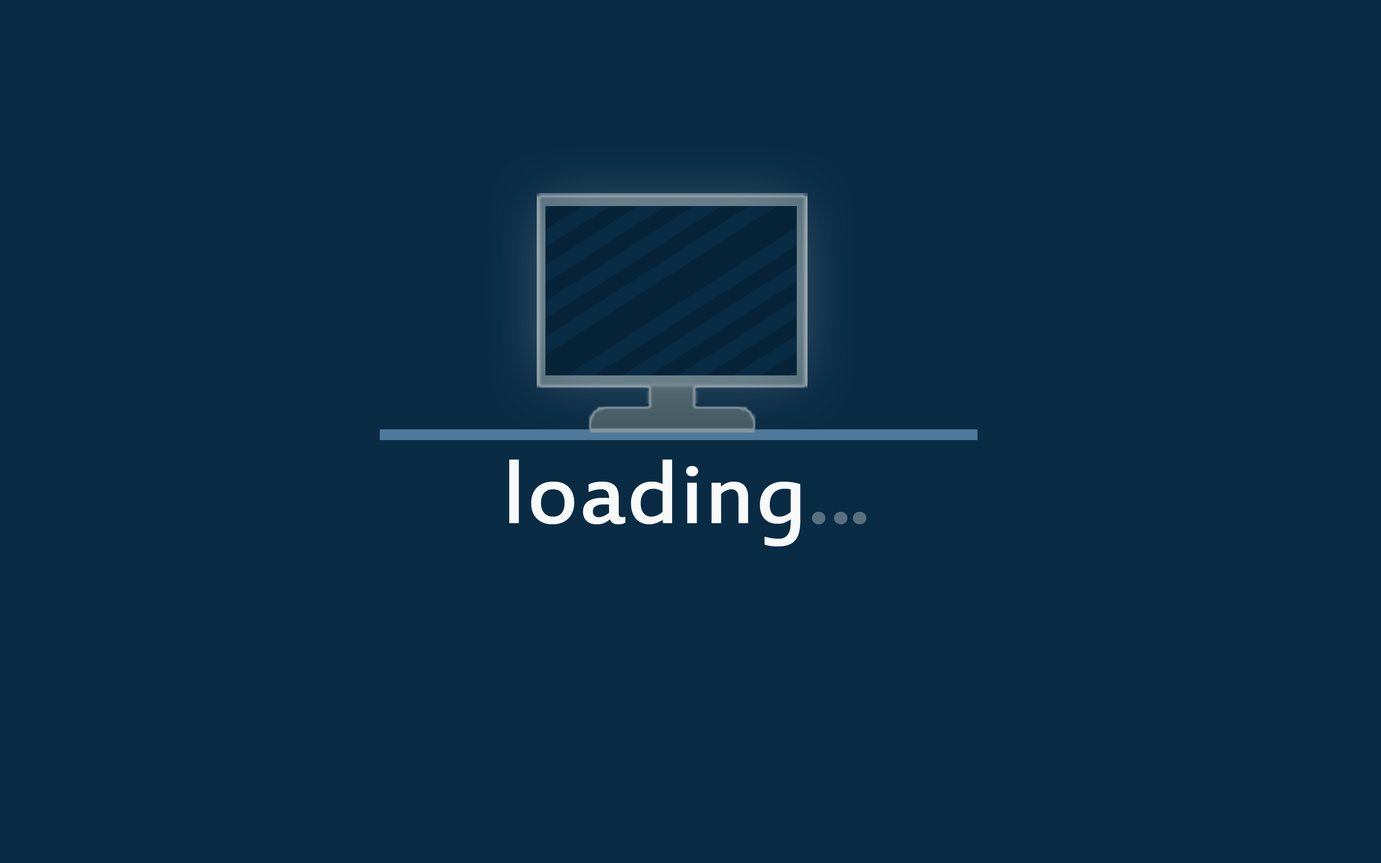
<style>
.page{position:relative;width:1381px;height:863px;background:#092b44}
.page>*{position:absolute;margin:0}
.t1{font:101px "EstrangeloEdessa";color:#f8f9f9}
.t2{font:101px "EstrangeloEdessa";color:#597080}
</style>
<div class="page">
<p class="t1" style="left:509px;top:460px;width:292px;height:87px">loading</p>
<p class="t2" style="left:812px;top:512px;width:14px;height:12px">.</p>
<p class="t2" style="left:834px;top:512px;width:14px;height:12px">.</p>
<p class="t2" style="left:853px;top:512px;width:14px;height:12px">.</p>
</div>
